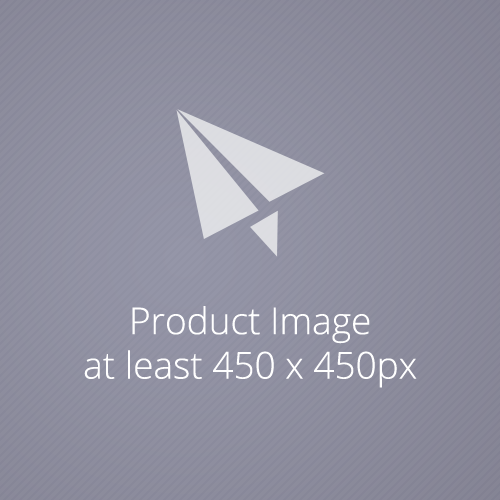
<style>
.page{position:relative;width:500px;height:500px}
.page>*{position:absolute;margin:0}
.t1{font:37px "OpenSans-Light";color:#ffffff}
</style>
<div class="page">
<p class="t1" style="left:84px;top:306px;width:333px;height:82px;text-align:center">Product Image<br>at least 450 x 450px</p>
</div>
